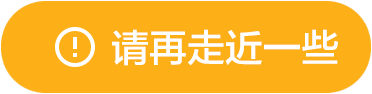
<style>
.page{position:relative;width:372px;height:94px;background:#fdaf17}
.page>*{position:absolute;margin:0}
.t1{font:38px "FZLTZHK--GBK1-0";color:#ffffff}
</style>
<div class="page">
<p class="t1" style="left:112px;top:29px;width:226px;height:37px">请再走近一些</p>
</div>
